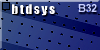
<style>
.page{position:relative;width:100px;height:50px}
.page>*{position:absolute;margin:0}
.t1{font:12.3px "Impact";letter-spacing:0.1em;color:#ffffff;scale:1.09 1}
.t2{font:11px "Arial-BoldMT";letter-spacing:-0.05em;color:#d0d7ff}
</style>
<div class="page">
<p class="t1" style="left:12px;top:4px;width:43px;height:12px">btdsys</p>
<p class="t2" style="left:78px;top:4px;width:19px;height:8px">B32</p>
</div>
